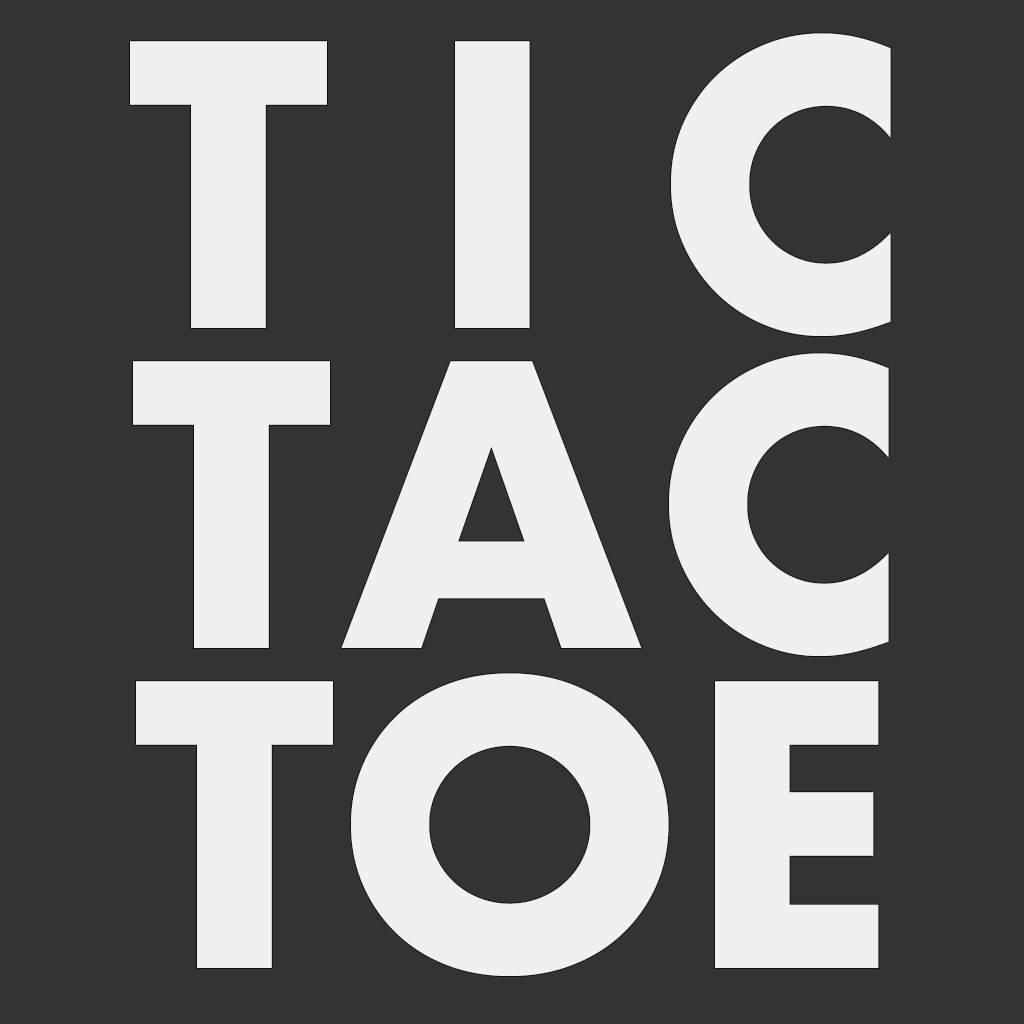
<style>
.page{position:relative;width:1024px;height:1024px;background:#333333}
.page>*{position:absolute;margin:0}
.t1{font:380px/320px "Futura-Bold";letter-spacing:0.25em;color:#f0f0f0}
.t2{font:380px/320px "Futura-Bold";letter-spacing:0.05em;color:#f0f0f0}
.t3{font:380px/320px "Futura-Bold";color:#f0f0f0}
</style>
<div class="page">
<p class="t1" style="left:130px;top:33px;width:761px;height:943px;text-align:center">TIC<br><span class="t2">TAC<br></span><span class="t3">TOE</span></p>
</div>
